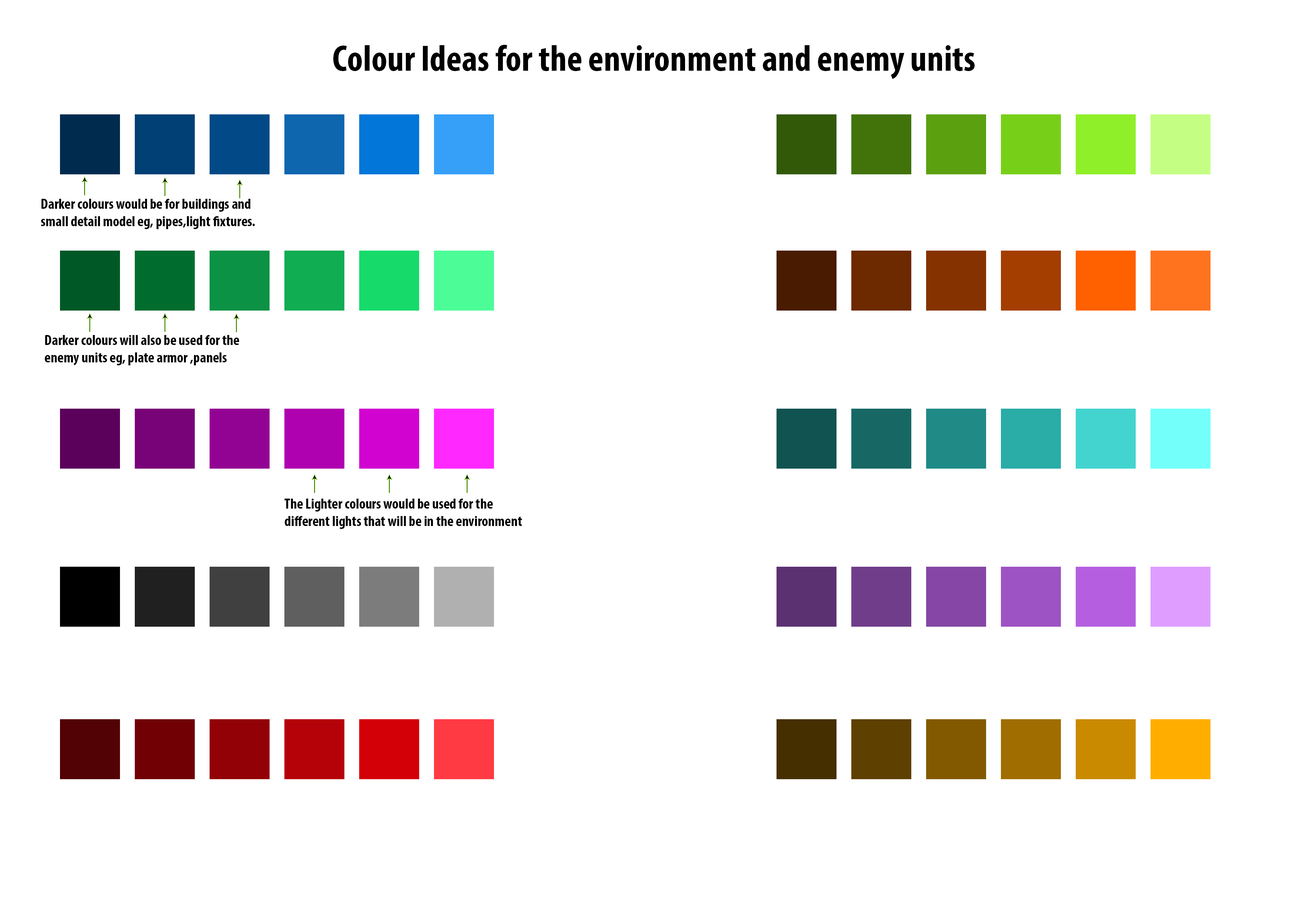
<style>
.page{position:relative;width:1299px;height:918px;background:#ffffff}
.page>*{position:absolute;margin:0}
.t1{font:37px "MyriadPro-BoldCond";color:#000000}
.t2{font:14.6px "MyriadPro-BoldCond";color:#000000}
</style>
<div class="page">
<p class="t1" style="left:333px;top:45px;width:641px;height:34px">Colour Ideas for the environment and enemy units</p>
<p class="t2" style="left:41px;top:199px;width:214px;height:30px">Darker colours would be for buildings and small detail model eg, pipes,light fixtures.</p>
<p class="t2" style="left:45px;top:335px;width:194px;height:30px">Darker colours will also be used for the enemy units eg, plate armor ,panels</p>
<p class="t2" style="left:284px;top:499px;width:238px;height:30px">The Lighter colours would be used for the different lights that will be in the environment</p>
</div>
